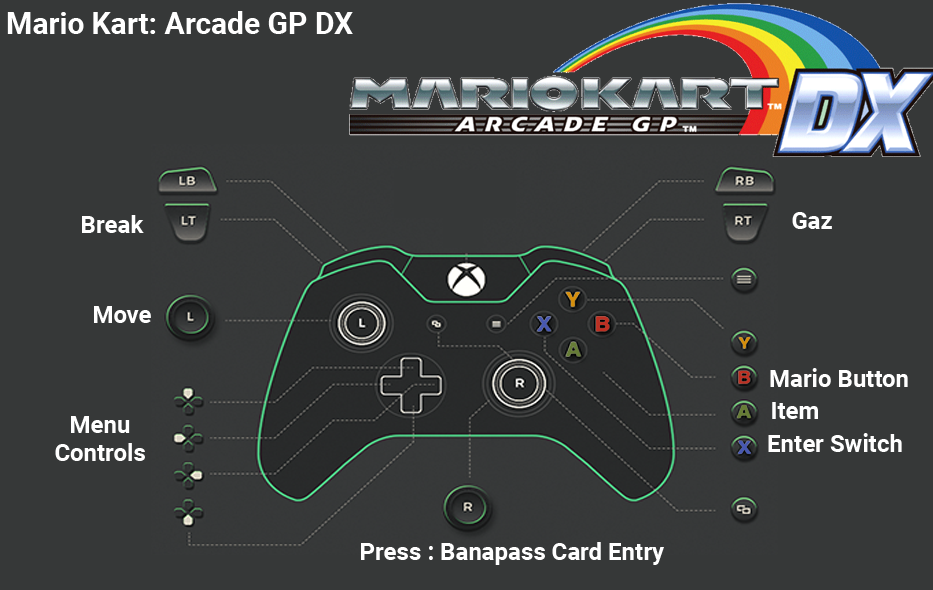
<style>
.page{position:relative;width:933px;height:590px;background:#363838}
.page>*{position:absolute;margin:0}
.t1{font:30px "Roboto-Bold";color:#ffffff}
.t2{font:24px "Roboto-Bold";color:#ffffff}
.t3{font:24px/28px "Roboto-Bold";color:#ffffff}
</style>
<div class="page">
<p class="t1" style="left:7px;top:11px;width:346px;height:23px">Mario Kart: Arcade GP DX</p>
<p class="t2" style="left:82px;top:215px;width:62px;height:18px">Break</p>
<p class="t2" style="left:792px;top:212px;width:40px;height:17px">Gaz</p>
<p class="t2" style="left:94px;top:306px;width:57px;height:17px">Move</p>
<p class="t2" style="left:770px;top:368px;width:138px;height:19px">Mario Button</p>
<p class="t2" style="left:772px;top:402px;width:46px;height:17px">Item</p>
<p class="t3" style="left:55px;top:416px;width:90px;height:45px;text-align:center">Menu<br>Controls</p>
<p class="t2" style="left:768px;top:433px;width:134px;height:19px">Enter Switch</p>
<p class="t2" style="left:361px;top:542px;width:303px;height:23px">Press : Banapass Card Entry</p>
</div>
